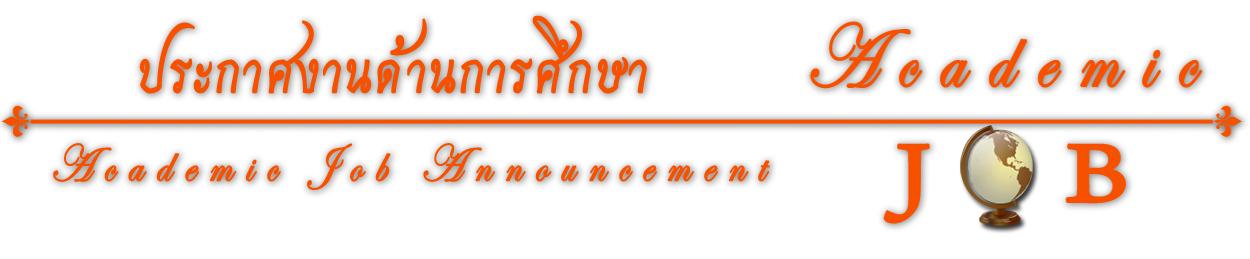
<style>
.page{position:relative;width:1250px;height:259px;background:#ffffff}
.page>*{position:absolute;margin:0}
.t1{font:80.1px "THCharmonman";letter-spacing:0.02em;color:#f75100;font-weight:bold;scale:0.83 1}
.t2{font:52.6px "EdwardianScriptITC";letter-spacing:0.28em;color:#f75100;font-weight:bold;scale:0.83 1}
</style>
<div class="page">
<p class="t1" style="left:139px;top:15px;width:508px;height:79px">ประกาศงานด้านการศึกษา</p>
<p class="t2" style="left:53px;top:143px;width:717px;height:47px">Academic Job Announcement</p>
</div>
